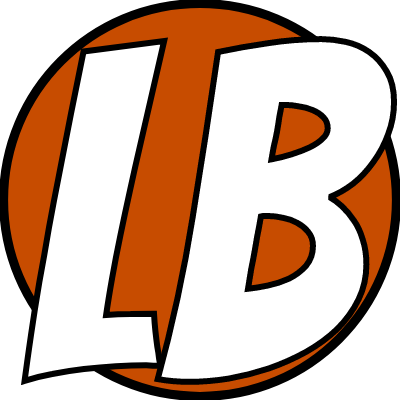
<style>
.page{position:relative;width:400px;height:400px;background:#ffffff}
.page>*{position:absolute;margin:0}
.t1{font:460.7px "Bangers-Regular";color:#ffffff}
.t2{font:79px "DejaVuSans";color:#ffffff}
</style>
<div class="page">
<p class="t1" style="left:21px;top:36px;width:376px;height:349px"><span class="t2"><br><br></span>LB</p>
</div>
